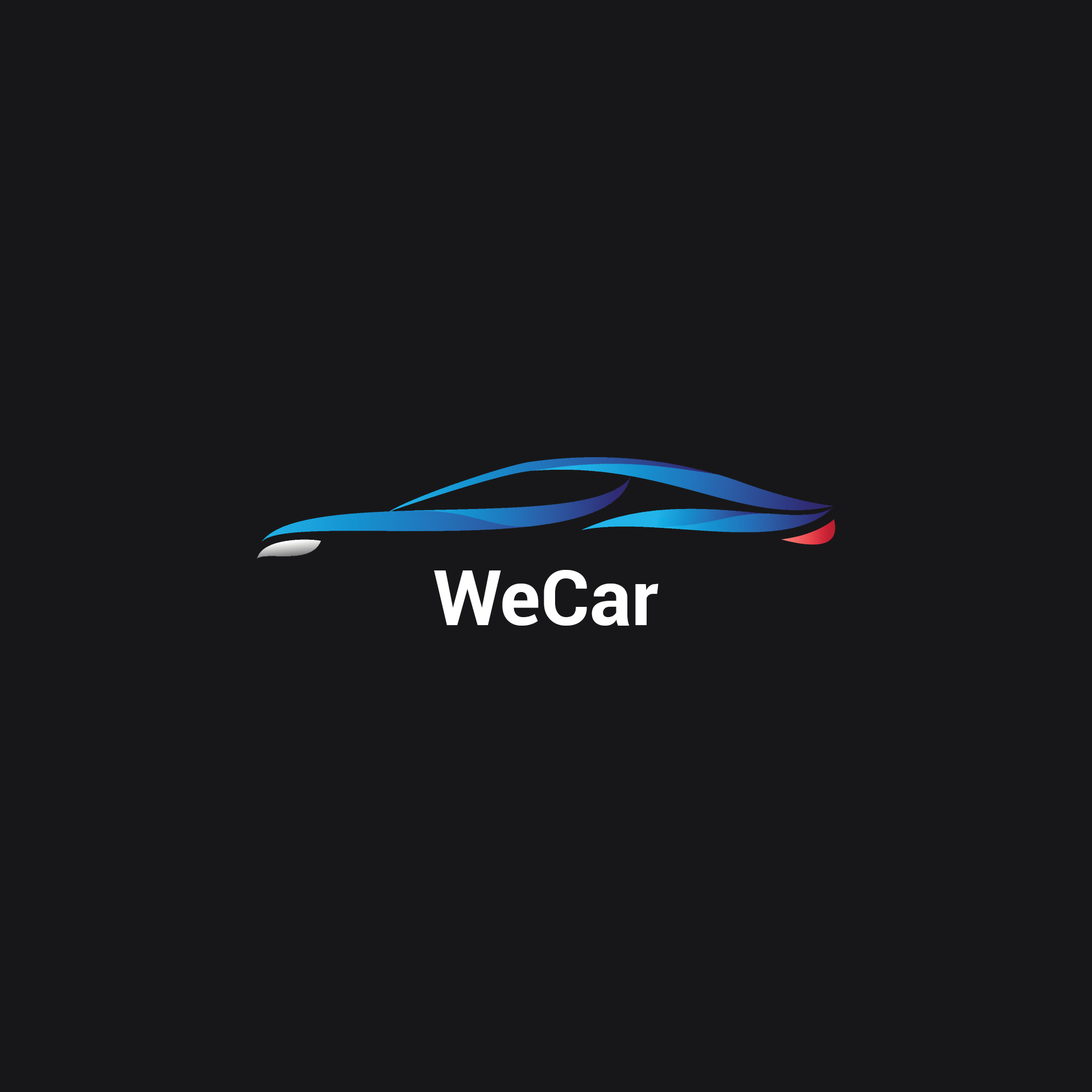
<style>
.page{position:relative;width:1092px;height:1092px;background:#171719}
.page>*{position:absolute;margin:0}
.t1{font:77.2px "Roboto-Bold";color:#ffffff}
</style>
<div class="page">
<p class="t1" style="left:434px;top:570px;width:225px;height:56px">WeCar</p>
</div>
